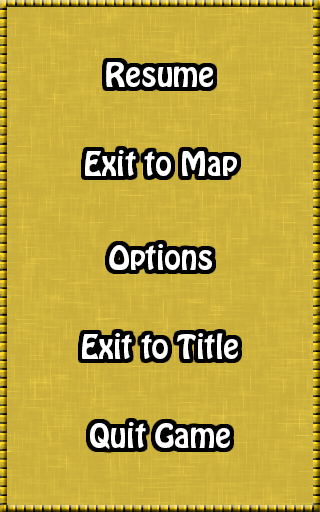
<style>
.page{position:relative;width:320px;height:512px;background:#ccb13d}
.page>*{position:absolute;margin:0}
.t1{font:30px "HoboStd";color:#ffffff}
</style>
<div class="page">
<p class="t1" style="left:106px;top:62px;width:107px;height:25px">Resume</p>
<p class="t1" style="left:85px;top:150px;width:152px;height:26px">Exit to Map</p>
<p class="t1" style="left:109px;top:244px;width:103px;height:26px">Options</p>
<p class="t1" style="left:82px;top:333px;width:156px;height:26px">Exit to Title</p>
<p class="t1" style="left:90px;top:422px;width:140px;height:27px">Quit Game</p>
</div>
